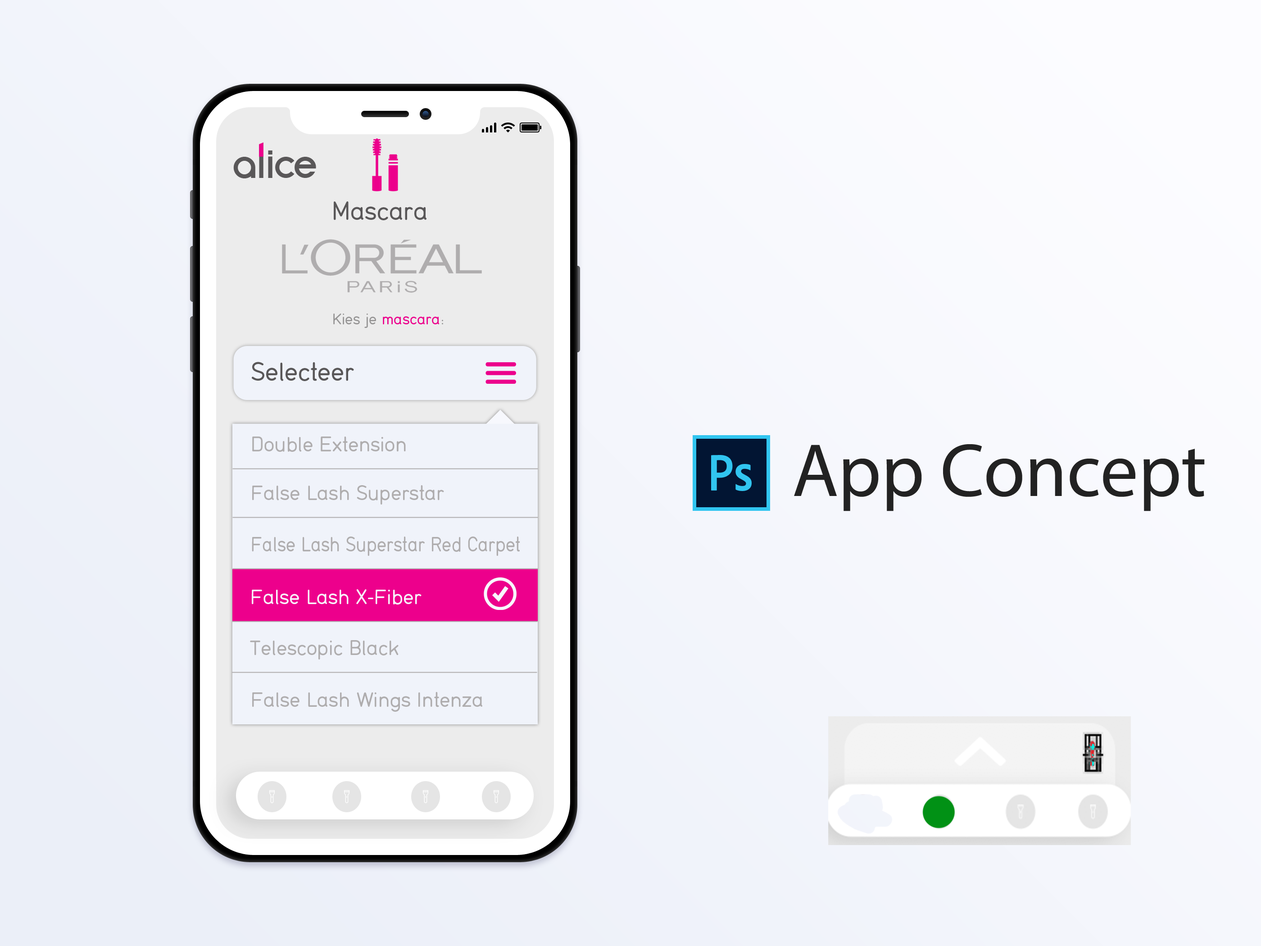
<style>
.page{position:relative;width:1261px;height:946px}
.page>*{position:absolute;margin:0}
.t1{font:40.7px "AquaGrotesque";letter-spacing:-0.075em;color:#595758}
.t2{font:40.7px "AquaGrotesque";letter-spacing:-0.1em;color:#595758}
.t3{font:40.7px "AquaGrotesque";letter-spacing:-0.15em;color:#595758}
.t4{font:27px "Din16-Normal";letter-spacing:0.01em;color:#595758}
.t5{font:16.2px "Din16-Normal";letter-spacing:0.01em;color:#959494}
.t6{font:16.2px "Din16-Normal";letter-spacing:0.01em;color:#ec008c}
.t7{font:21.6px "Din16-Normal";letter-spacing:0.01em;color:#afadae}
.t8{font:75.7px "MyriadPro-Regular";color:#222222}
.t9{font:21.6px "Din16-Normal";letter-spacing:0.01em;color:#afadae;scale:0.9 1}
.t10{font:21.6px "Din16-Normal";letter-spacing:0.01em;color:#f8f9fd}
</style>
<div class="page">
<p class="t1" style="left:233px;top:142px;width:83px;height:36px">al<span class="t2">i</span><span class="t3">ce</span></p>
<p class="t4" style="left:334px;top:201px;width:92px;height:19px">Mascara</p>
<p class="t5" style="left:333px;top:313px;width:110px;height:15px">Kies je <span class="t6">mascara</span>:</p>
<p class="t4" style="left:252px;top:362px;width:102px;height:19px">Selecteer</p>
<p class="t7" style="left:252px;top:436px;width:154px;height:16px">Double Extension</p>
<p class="t8" style="left:794px;top:444px;width:411px;height:67px">App Concept</p>
<p class="t7" style="left:252px;top:485px;width:192px;height:19px">False Lash Superstar</p>
<p class="t9" style="left:252px;top:536px;width:268px;height:20px">False Lash Superstar Red Carpet</p>
<p class="t10" style="left:252px;top:589px;width:170px;height:15px">False Lash X-Fiber</p>
<p class="t7" style="left:250px;top:640px;width:149px;height:19px">Telescopic Black</p>
<p class="t7" style="left:252px;top:692px;width:230px;height:20px">False Lash Wings Intenza</p>
</div>
